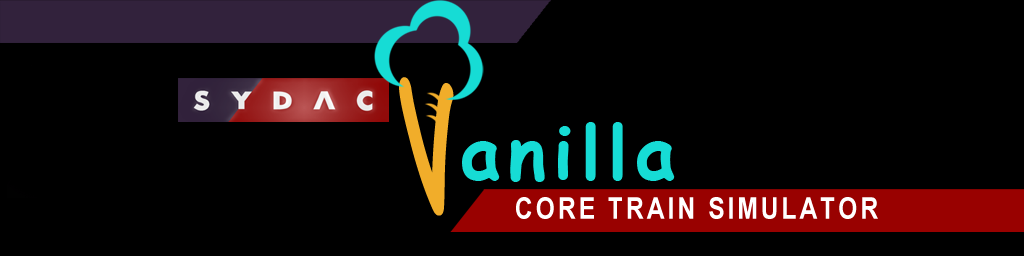
<style>
.page{position:relative;width:1024px;height:256px;background:#000000}
.page>*{position:absolute;margin:0}
.t1{font:145.7px "ComicSansMS-Bold";letter-spacing:0.1em;color:#f1ad2a;scale:0.6 1}
.t2{font:72.8px "ComicSansMS-Bold";letter-spacing:0.1em;color:#16dcd5}
.t3{font:30px "ArialNarrow-Bold";letter-spacing:0.1em;color:#ffffff}
</style>
<div class="page">
<p class="t1" style="left:399px;top:77px;width:55px;height:139px;rotate:-8deg">V</p>
<p class="t2" style="left:462px;top:122px;width:213px;height:60px">anilla</p>
<p class="t3" style="left:516px;top:197px;width:362px;height:22px">CORE TRAIN SIMULATOR</p>
</div>
